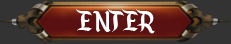
<style>
.page{position:relative;width:231px;height:44px;background:#333333}
.page>*{position:absolute;margin:0}
.t1{font:32px "EnchantedLand";color:#ffffff}
</style>
<div class="page">
<p class="t1" style="left:76px;top:9px;width:79px;height:25px">ENTER</p>
</div>
